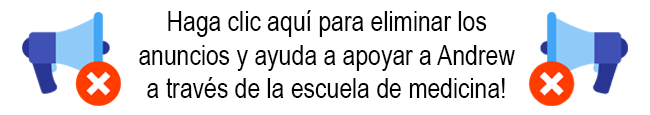
<style>
.page{position:relative;width:650px;height:115px;background:#ffffff}
.page>*{position:absolute;margin:0}
.t1{font:28px "ArialNarrow";color:#030303}
</style>
<div class="page">
<p class="t1" style="left:139px;top:10px;width:376px;height:88px;text-align:center">Haga clic aquí para eliminar los <br>anuncios y ayuda a apoyar a Andrew<br>a través de la escuela de medicina!</p>
</div>
